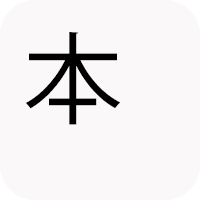
<style>
.page{position:relative;width:200px;height:200px;background:#faf8f8}
.page>*{position:absolute;margin:0}
.t1{font:99.6px "KozGoPr6N-Regular";color:#000000}
</style>
<div class="page">
<p class="t1" style="left:25px;top:32px;width:96px;height:93px">本</p>
</div>
